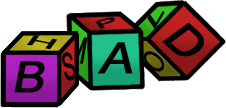
<style>
.page{position:relative;width:226px;height:108px;background:#ffffff}
.page>*{position:absolute;margin:0}
.t1{font:15.6px "ArialMT";color:#050505;font-weight:bold;font-style:italic;scale:2.07 1}
.t2{font:15.2px "ArialMT";color:#050505;font-weight:bold;font-style:italic;scale:2.63 1}
.t3{font:42.7px "ArialMT";color:#050505;font-weight:bold;font-style:italic;scale:1.12 1}
.t4{font:15px "ArialMT";color:#050505;font-weight:bold;font-style:italic;scale:2.64 1}
.t5{font:36.2px "ArialMT";color:#050505;font-weight:bold;font-style:italic;scale:0.62 1}
.t6{font:37.5px "ArialMT";color:#050505;font-weight:bold;font-style:italic;scale:0.51 1}
.t7{font:43px "ArialMT";color:#050505;font-weight:bold;font-style:italic;scale:1.15 1}
.t8{font:31.8px "ArialMT";color:#050505;font-weight:bold;font-style:italic;scale:0.65 1}
.t9{font:42.9px "ArialMT";color:#050505;font-weight:bold;font-style:italic;scale:1.09 1}
</style>
<div class="page">
<p class="t1" style="left:95px;top:17px;width:20px;height:12px;rotate:-16deg">P</p>
<p class="t2" style="left:147px;top:11px;width:18px;height:18px;rotate:-59deg">L</p>
<p class="t3" style="left:162px;top:23px;width:42px;height:34px;rotate:42deg">D</p>
<p class="t4" style="left:27px;top:35px;width:31px;height:14px;rotate:11deg">H</p>
<p class="t5" style="left:67px;top:36px;width:21px;height:28px;rotate:4deg">M</p>
<p class="t6" style="left:62px;top:52px;width:14px;height:29px;rotate:-17deg">S</p>
<p class="t7" style="left:98px;top:42px;width:35px;height:32px">A</p>
<p class="t8" style="left:143px;top:51px;width:22px;height:21px;rotate:-58deg">O</p>
<p class="t9" style="left:14px;top:61px;width:31px;height:32px">B</p>
</div>
